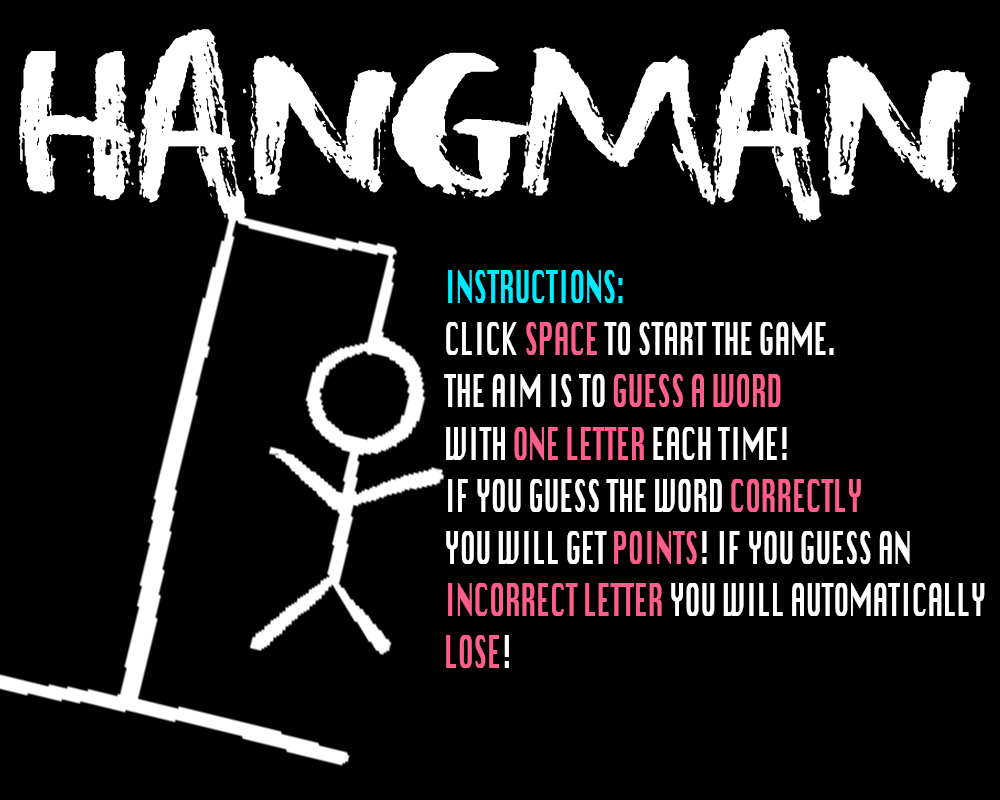
<style>
.page{position:relative;width:1000px;height:800px;background:#000000}
.page>*{position:absolute;margin:0}
.t1{font:43.5px "Krungthep";color:#ffffff;scale:0.54 1}
.t2{font:43.5px "Krungthep";color:#00eaff;scale:0.54 1}
.t3{font:43.5px "Krungthep";color:#ff5e8b;scale:0.54 1}
</style>
<div class="page">
<p class="t1" style="left:444px;top:270px;width:541px;height:398px"><span class="t2">INSTRUCTIONS: <br></span>CLICK <span class="t3">SPACE </span>TO START THE GAME.  <br>THE AIM IS TO<span class="t3"> GUESS A WORD <br></span>WITH<span class="t3"> ONE LETTER </span>EACH TIME!<br>IF YOU GUESS THE WORD <span class="t3">CORRECTLY <br></span>YOU WILL GET <span class="t3">POINTS</span>! IF YOU GUESS AN<br><span class="t3">INCORRECT LETTER </span>YOU WILL AUTOMATICALLY<br><span class="t3">LOSE</span>!</p>
</div>
